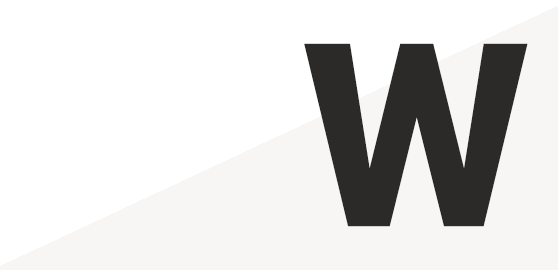
<style>
.page{position:relative;width:558px;height:270px;background:#ffffff}
.page>*{position:absolute;margin:0}
.t1{font:253.1px "Industry-Black";color:#2b2a28;text-transform:uppercase}
</style>
<div class="page">
<p class="t1" style="left:304px;top:43px;width:224px;height:184px">W</p>
</div>
